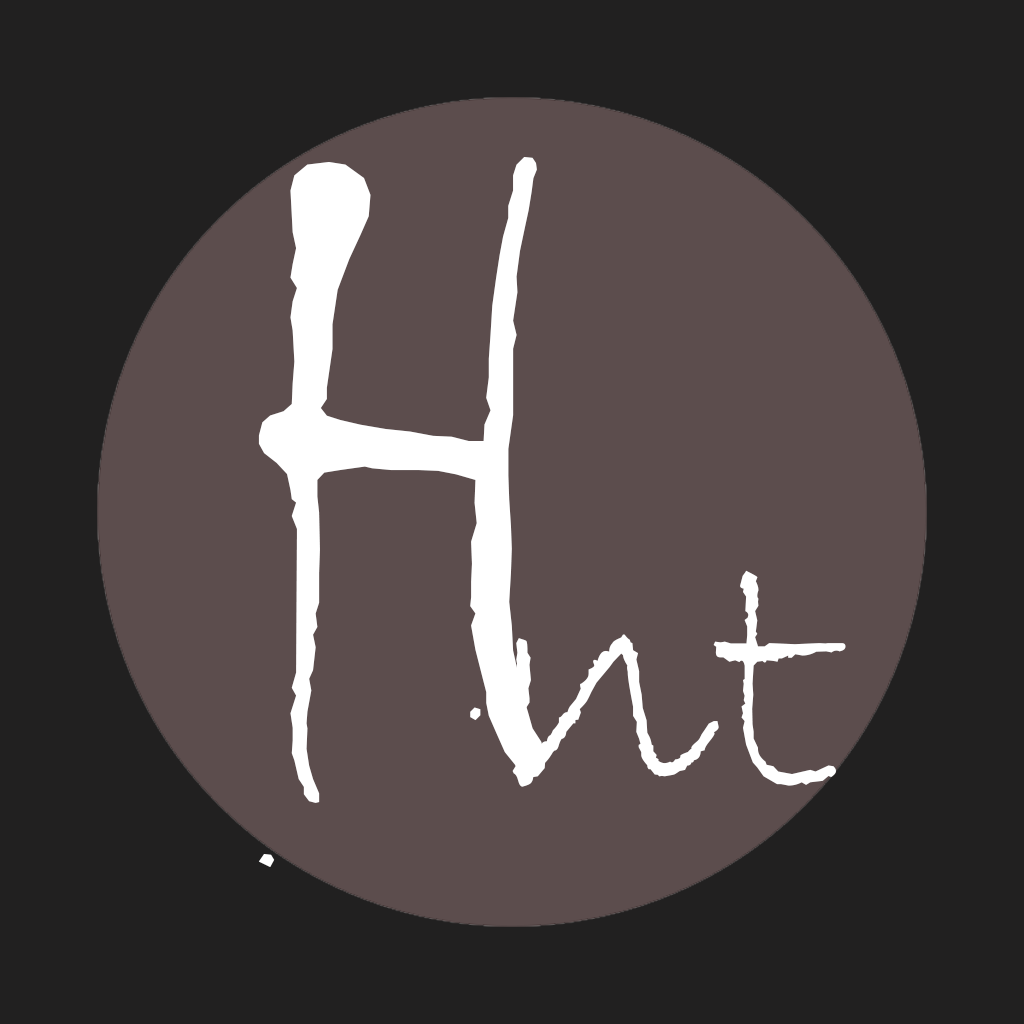
<style>
.page{position:relative;width:1024px;height:1024px;background:#212020}
.page>*{position:absolute;margin:0}
.t1{font:885.2px "Chiller-Regular";letter-spacing:1.04em;color:#ffffff}
.t2{font:372.6px "BradleyHandITC";color:#ffffff}
</style>
<div class="page">
<p class="t1" style="left:258px;top:157px;width:288px;height:710px">H</p>
<p class="t2" style="left:512px;top:570px;width:334px;height:217px">nt</p>
</div>
